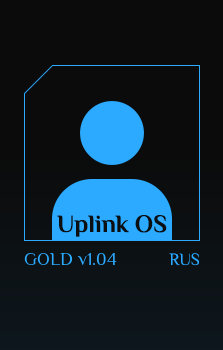
<style>
.page{position:relative;width:223px;height:350px;background:#0b0b0b}
.page>*{position:absolute;margin:0}
.t1{font:25px "Philosopher-Bold";color:#0c0f11}
.t2{font:17px "Philosopher-Regular";color:#2baaff}
</style>
<div class="page">
<p class="t1" style="left:57px;top:215px;width:110px;height:22px">Uplink OS</p>
<p class="t2" style="left:169px;top:253px;width:30px;height:13px">RUS</p>
</div>
